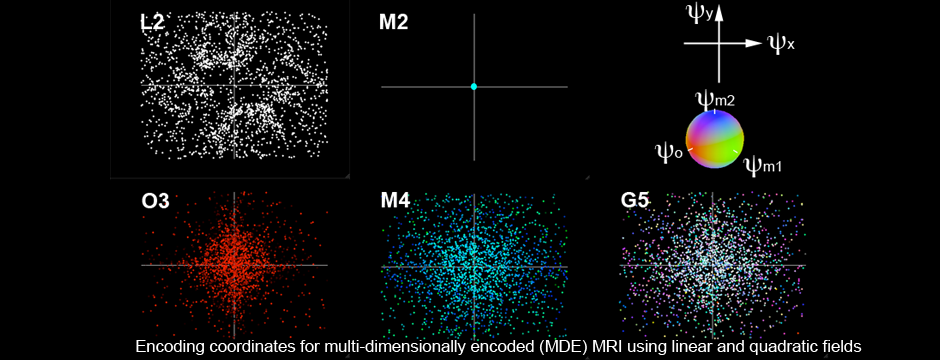
<style>
.page{position:relative;width:940px;height:360px;background:#000000}
.page>*{position:absolute;margin:0}
.t1{font:16.7px "ArialMT";color:#ffffff}
</style>
<div class="page">
<p class="t1" style="left:136px;top:340px;width:726px;height:15px">Encoding coordinates for multi-dimensionally encoded (MDE) MRI using linear and quadratic fields</p>
</div>
